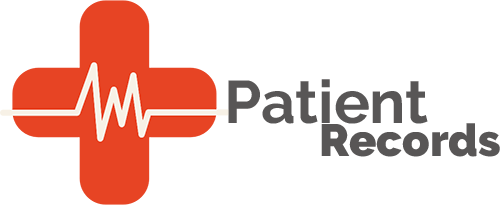
<style>
.page{position:relative;width:500px;height:205px;background:#ffffff}
.page>*{position:absolute;margin:0}
.t1{font:59.9px "Raleway-Bold";color:#585656}
.t2{font:45px "Raleway-Black";color:#585656}
</style>
<div class="page">
<p class="t1" style="left:228px;top:79px;width:200px;height:45px">Patient</p>
<p class="t2" style="left:321px;top:123px;width:179px;height:34px">Records</p>
</div>
